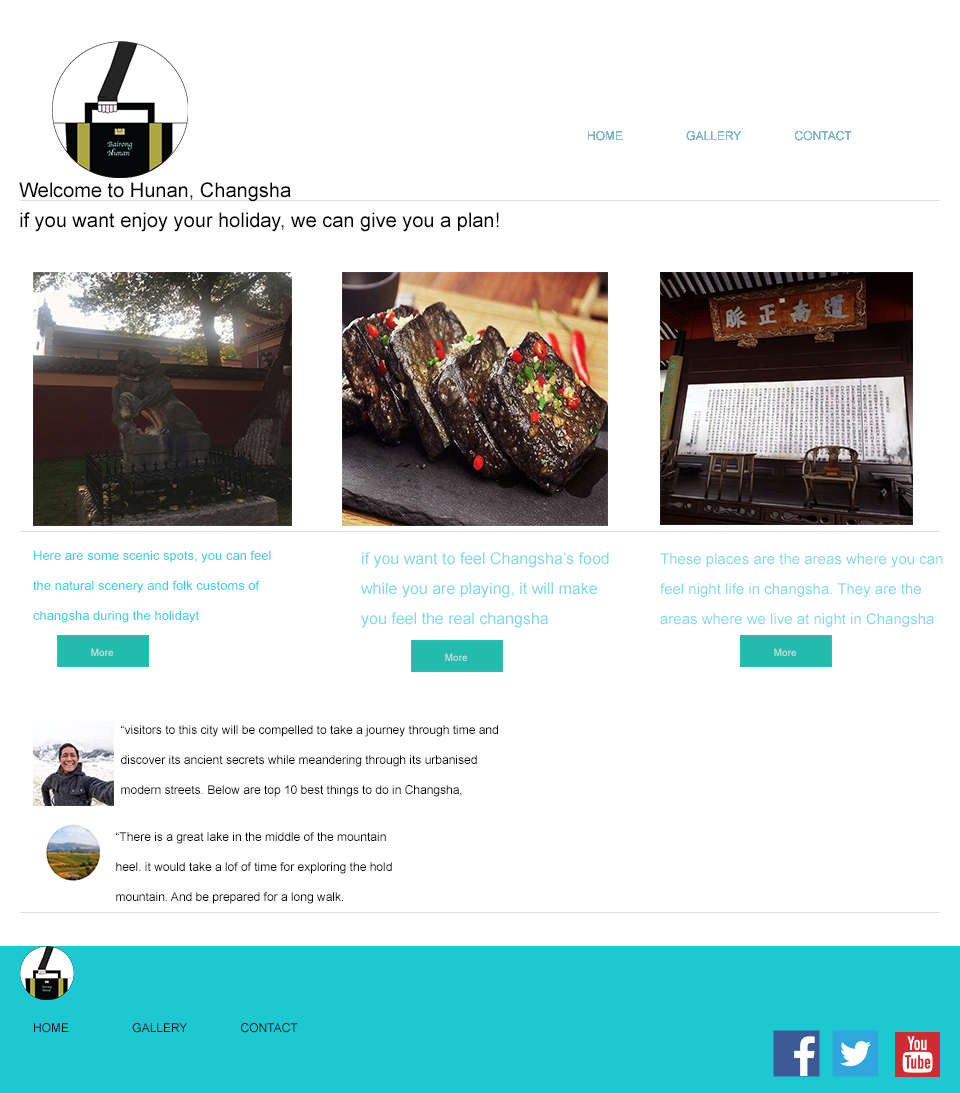
<style>
.page{position:relative;width:960px;height:1093px;background:#ffffff}
.page>*{position:absolute;margin:0}
.t1{font:12px "ArialMT";color:#77cad5}
.t2{font:20px/30px "ArialMT";color:#000000}
.t3{font:13px/30px "ArialMT";color:#3ccdde}
.t4{font:16px/30px "ArialMT";color:#81dbe7}
.t5{font:15px/30px "ArialMT";color:#81dbe7}
.t6{font:10px "ArialMT";color:#dedede}
.t7{font:12px/30px "ArialMT";color:#000000}
.t8{font:12px "ArialMT";color:#000000}
</style>
<div class="page">
<p class="t1" style="left:588px;top:131px;width:264px;height:10px">HOME                   GALLERY                CONTACT</p>
<p class="t1" style="left:588px;top:131px;width:264px;height:10px">HOME                   GALLERY                CONTACT</p>
<p class="t2" style="left:19px;top:182px;width:480px;height:50px">Welcome to Hunan, Changsha<br>if you want enjoy your holiday, we can give you a plan!<br>fif you want enjoy your holiday, we can give you a plan!</p>
<p class="t3" style="left:33px;top:550px;width:238px;height:73px">Here are some scenic spots, you can feel the natural scenery and folk customs of changsha during the holidayt</p>
<p class="t4" style="left:361px;top:552px;width:248px;height:76px">if you want to feel Changsha’s food while you are playing, it will make you feel the real changsha</p>
<p class="t5" style="left:660px;top:553px;width:283px;height:74px">These places are the areas where you can feel night life in changsha. They are the areas where we live at night in Changsha</p>
<p class="t6" style="left:91px;top:648px;width:22px;height:8px">More</p>
<p class="t6" style="left:445px;top:653px;width:22px;height:8px">More</p>
<p class="t6" style="left:774px;top:648px;width:22px;height:8px">More</p>
<p class="t7" style="left:121px;top:725px;width:377px;height:72px">“visitors to this city will be compelled to take a journey through time and discover its ancient secrets while meandering through its urbanised modern streets. Below are top 10 best things to do in Changsha, China..”</p>
<p class="t7" style="left:116px;top:832px;width:276px;height:72px">“There is a great lake in the middle of the mountain heel. it would take a lof of time for exploring the hold mountain. And be prepared for a long walk.</p>
<p class="t8" style="left:34px;top:1023px;width:264px;height:10px">HOME                   GALLERY                CONTACT</p>
</div>
